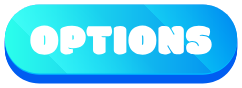
<style>
.page{position:relative;width:242px;height:88px;background:#ffffff}
.page>*{position:absolute;margin:0}
.t1{font:44px "Modak";letter-spacing:0.02em;color:#ffffff}
</style>
<div class="page">
<p class="t1" style="left:30px;top:25px;width:182px;height:30px">OPTIONS</p>
</div>
